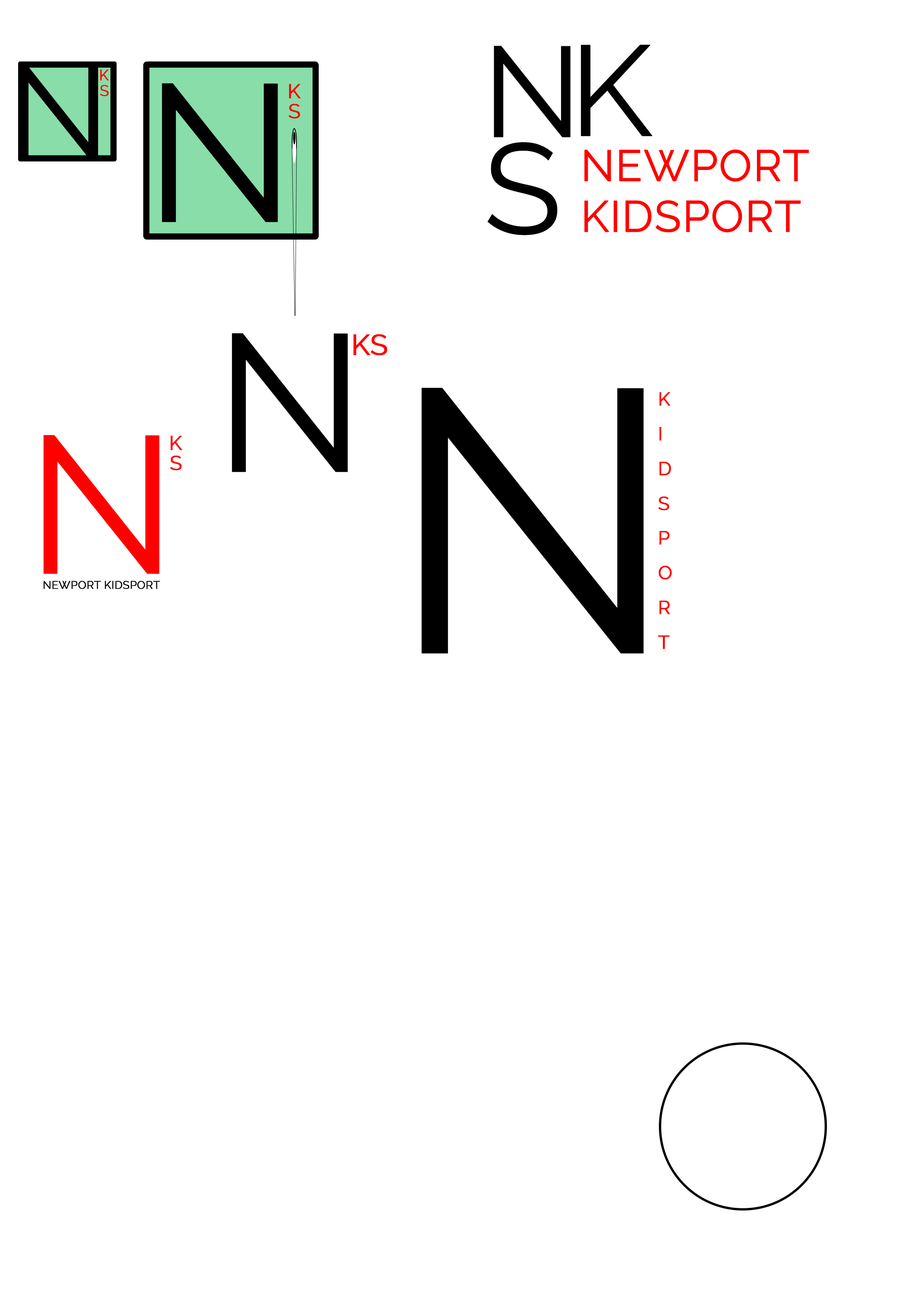
<style>
.page{position:relative;width:918px;height:1299px;background:#ffffff}
.page>*{position:absolute;margin:0}
.t1{font:128px "Raleway";color:#000000;text-transform:uppercase;font-weight:bold}
.t2{font:133.1px "Raleway";color:#000000;text-transform:uppercase;font-weight:bold}
.t3{font:15.4px "Raleway";color:#ff0000;text-transform:uppercase;font-weight:bold}
.t4{font:194.5px "Raleway";color:#000000;text-transform:uppercase;font-weight:bold}
.t5{font:20.1px "Raleway";color:#ff0000;text-transform:uppercase;font-weight:bold}
.t6{font:43.7px/50.6px "Raleway";color:#ff0000;text-transform:uppercase;font-weight:bold}
.t7{font:28.8px "Raleway";color:#ff0000;text-transform:uppercase;font-weight:bold}
.t8{font:373.3px "Raleway";color:#000000;text-transform:uppercase;font-weight:bold}
.t9{font:18.8px/34.7px "Raleway";color:#ff0000;text-transform:uppercase;font-weight:bold}
.t10{font:194.5px "Raleway";color:#ff0000;text-transform:uppercase;font-weight:bold}
.t11{font:11px "Raleway";color:#000000;text-transform:uppercase;font-weight:bold}
</style>
<div class="page">
<p class="t1" style="left:494px;top:46px;width:77px;height:91px">n</p>
<p class="t1" style="left:581px;top:44px;width:72px;height:92px">k</p>
<p class="t2" style="left:19px;top:64px;width:79px;height:95px">n</p>
<p class="t3" style="left:100px;top:69px;width:9px;height:12px">k</p>
<p class="t3" style="left:100px;top:85px;width:9px;height:11px">s</p>
<p class="t4" style="left:162px;top:83px;width:116px;height:139px">n</p>
<p class="t5" style="left:289px;top:84px;width:12px;height:14px">k</p>
<p class="t5" style="left:289px;top:104px;width:11px;height:14px">s</p>
<p class="t1" style="left:488px;top:142px;width:70px;height:93px">s</p>
<p class="t6" style="left:584px;top:149px;width:225px;height:83px;text-align:justify">newport<br>kidsport</p>
<p class="t4" style="left:232px;top:333px;width:116px;height:139px">n</p>
<p class="t7" style="left:354px;top:334px;width:33px;height:21px">ks</p>
<p class="t8" style="left:422px;top:388px;width:222px;height:265px">n</p>
<p class="t9" style="left:658px;top:392px;width:14px;height:257px;text-align:justify">k<br>i<br>d<br>s<br>p<br>o<br>r<br>t</p>
<p class="t10" style="left:43px;top:435px;width:117px;height:139px">n</p>
<p class="t5" style="left:171px;top:435px;width:12px;height:15px">k</p>
<p class="t5" style="left:170px;top:455px;width:12px;height:15px">s</p>
<p class="t11" style="left:43px;top:581px;width:117px;height:8px">newport kidsport</p>
</div>
